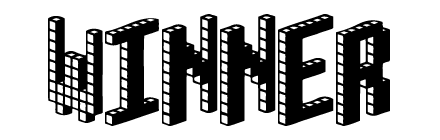
<style>
.page{position:relative;width:440px;height:140px;background:#ffffff}
.page>*{position:absolute;margin:0}
.t1{font:115px "Blox-BRK";color:#000000}
</style>
<div class="page">
<p class="t1" style="left:48px;top:14px;width:342px;height:112px">Winner</p>
</div>
